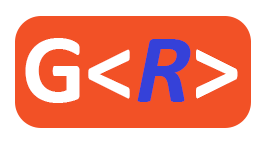
<style>
.page{position:relative;width:268px;height:144px;background:#f25126}
.page>*{position:absolute;margin:0}
.t1{font:100px "Calibri-Bold";color:#ffffff}
.t2{font:100px "Calibri-BoldItalic";color:#3541d9}
</style>
<div class="page">
<p class="t1" style="left:25px;top:38px;width:213px;height:65px">G&lt;<span class="t2">R</span>&gt;</p>
</div>
